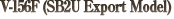
<style>
.page{position:relative;width:174px;height:19px;background:#ffffff}
.page>*{position:absolute;margin:0}
.t1{font:16px "RyuminPro-ExBold";letter-spacing:-0.08em;color:#4a3f32;font-weight:bold;scale:0.88 1}
</style>
<div class="page">
<p class="t1" style="left:0px;top:0px;width:172px;height:16px">V-156F (SB2U Export Model)</p>
</div>
